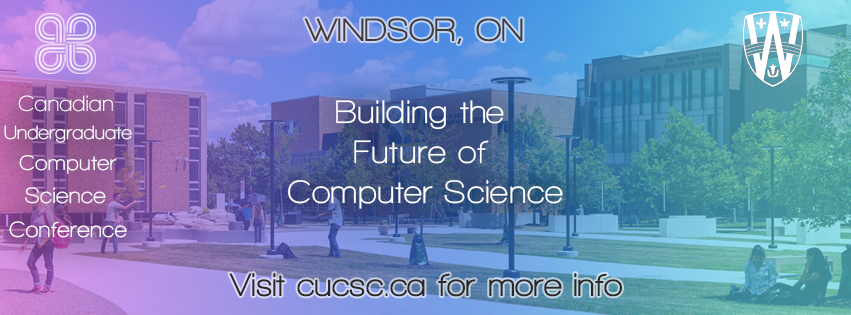
<style>
.page{position:relative;width:851px;height:315px}
.page>*{position:absolute;margin:0}
.t1{font:33.3px "WalkwayUltraBold";color:#463b3b}
.t2{font:22.6px "WalkwayBold";letter-spacing:0.01em;color:#ffffff}
.t3{font:33.3px "WalkwayBold";letter-spacing:0.025em;color:#ffffff}
.t4{font:33.3px "WalkwayBold";color:#ffffff}
.t5{font:33.3px "WalkwayBold";letter-spacing:0.01em;color:#ffffff}
.t6{font:19.7px "WalkwayBold";letter-spacing:0.01em;color:#ffffff}
.t7{font:21.6px "WalkwayBold";letter-spacing:0.025em;color:#ffffff}
.t8{font:22.6px "WalkwayBold";letter-spacing:0.025em;color:#ffffff}
.t9{font:33.3px "WalkwayUltraBold";color:#2b2727}
</style>
<div class="page">
<p class="t1" style="left:304px;top:18px;width:219px;height:26px">WINDSOR, ON</p>
<p class="t2" style="left:18px;top:95px;width:95px;height:17px">Canadian</p>
<p class="t3" style="left:288px;top:100px;width:275px;height:109px;text-align:center">Building<span class="t4"> the <br></span>Future<span class="t4"> of <br></span><span class="t5">Computer </span>Science</p>
<p class="t6" style="left:4px;top:125px;width:128px;height:18px">Undergraduate</p>
<p class="t7" style="left:19px;top:155px;width:98px;height:19px">Computer</p>
<p class="t8" style="left:25px;top:187px;width:81px;height:17px">Science</p>
<p class="t8" style="left:9px;top:221px;width:118px;height:17px">Conference</p>
<p class="t9" style="left:229px;top:273px;width:393px;height:24px">Visit cucsc.ca for more info</p>
</div>
